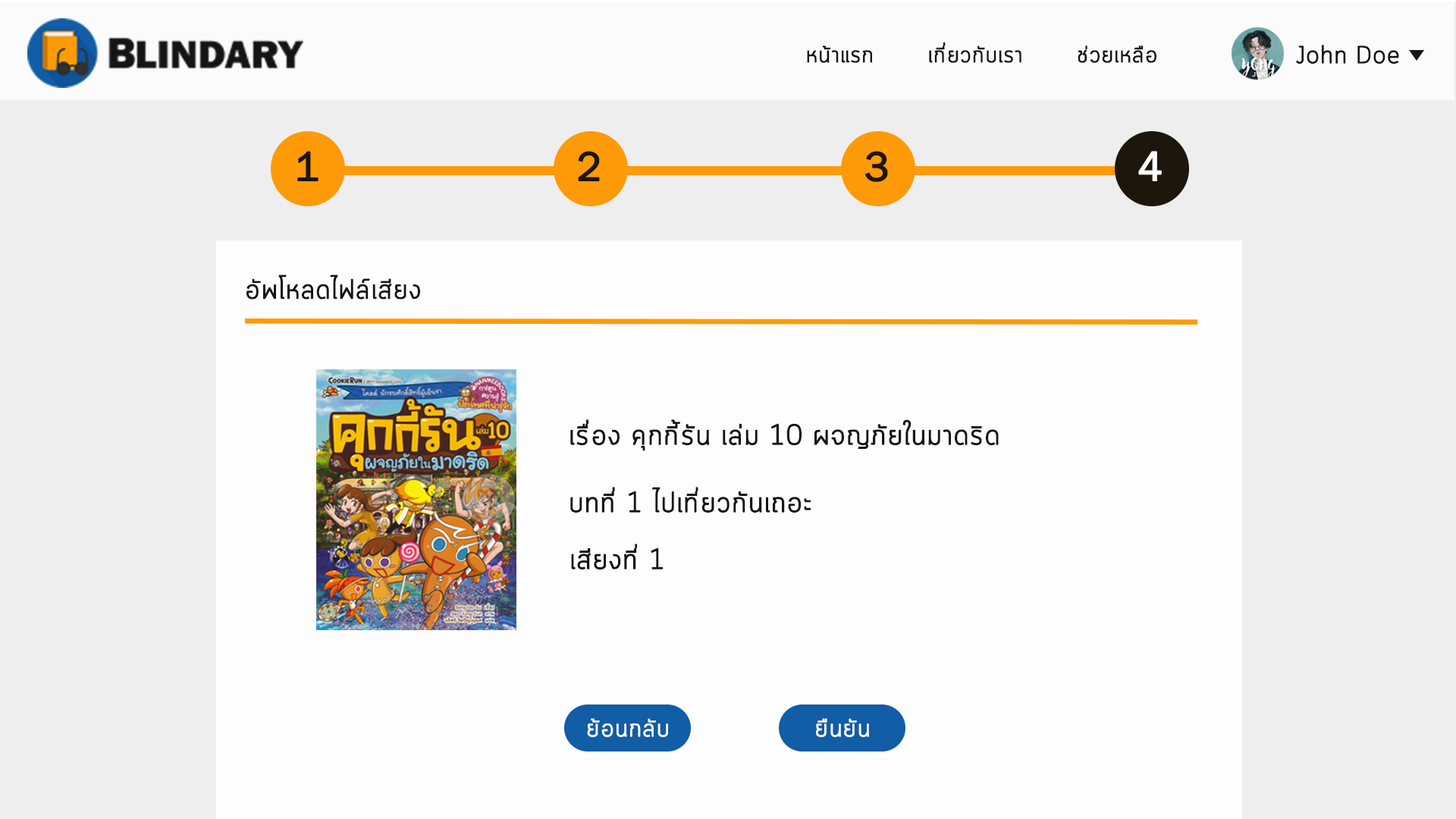
<style>
.page{position:relative;width:1456px;height:819px;background:#fdfdfd}
.page>*{position:absolute;margin:0}
.t1{font:22.7px "Cloud-Light";color:#141414;font-weight:bold}
.t2{font:24.2px "Cloud-Light";color:#141414;font-weight:bold}
.t3{font:42.1px "FranklinGothic-Book";color:#1c160d;font-weight:bold}
.t4{font:42.1px "FranklinGothic-Book";color:#ffffff;font-weight:bold}
.t5{font:27.3px "Cloud-Light";color:#141414;font-weight:bold}
.t6{font:28.4px "Cloud-Light";color:#141414;font-weight:bold}
.t7{font:24.6px "Cloud-Light";color:#fefdfd;font-weight:bold}
</style>
<div class="page">
<p class="t1" style="left:807px;top:42px;width:349px;height:21px">หน้าแรก       เกี่ยวกับเรา       ช่วยเหลือ</p>
<p class="t2" style="left:1296px;top:45px;width:103px;height:19px">John Doe</p>
<p class="t3" style="left:297px;top:151px;width:21px;height:30px">1</p>
<p class="t3" style="left:578px;top:151px;width:22px;height:30px">2</p>
<p class="t3" style="left:865px;top:151px;width:23px;height:31px">3</p>
<p class="t4" style="left:1138px;top:151px;width:24px;height:30px">4</p>
<p class="t5" style="left:246px;top:275px;width:174px;height:25px">อัพโหลดไฟล์เสียง</p>
<p class="t6" style="left:570px;top:419px;width:429px;height:32px">เรื่อง คุกกี้รัน เล่ม 10 ผจญภัยในมาดริด</p>
<p class="t6" style="left:570px;top:487px;width:241px;height:26px">บทที่ 1 ไปเที่ยวกันเถอะ</p>
<p class="t6" style="left:571px;top:544px;width:92px;height:26px">เสียงที่ 1</p>
<p class="t7" style="left:587px;top:718px;width:81px;height:19px">ย้อนกลับ</p>
<p class="t7" style="left:816px;top:718px;width:53px;height:19px">ยืนยัน</p>
</div>
